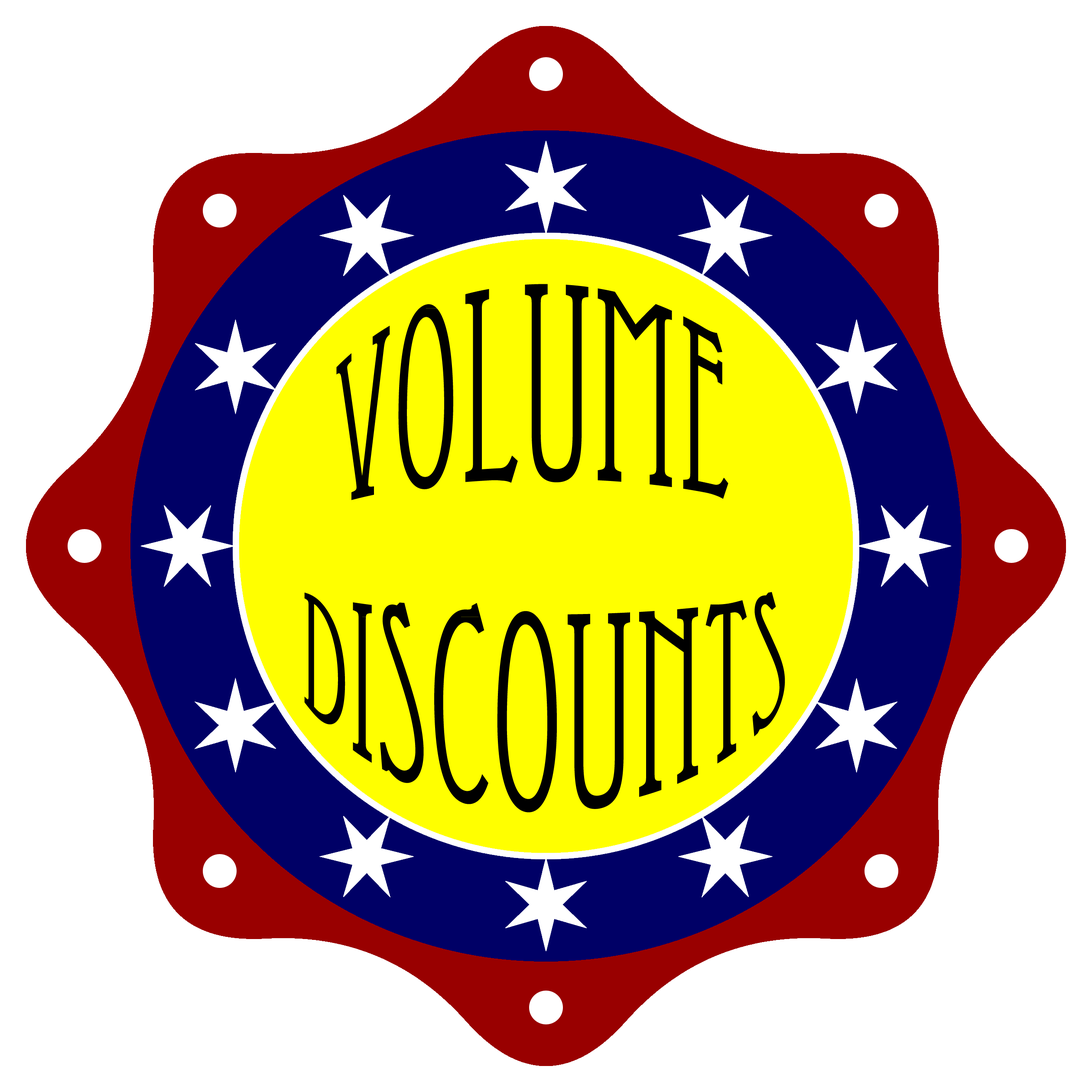
<style>
.page{position:relative;width:1092px;height:1092px;background:#ffffff}
.page>*{position:absolute;margin:0}
.t1{font:151.7px "EccentricStd";color:#000000}
</style>
<div class="page">
<p class="t1" style="left:304px;top:284px;width:481px;height:528px;text-align:center">Volume <br>Discounts</p>
</div>
